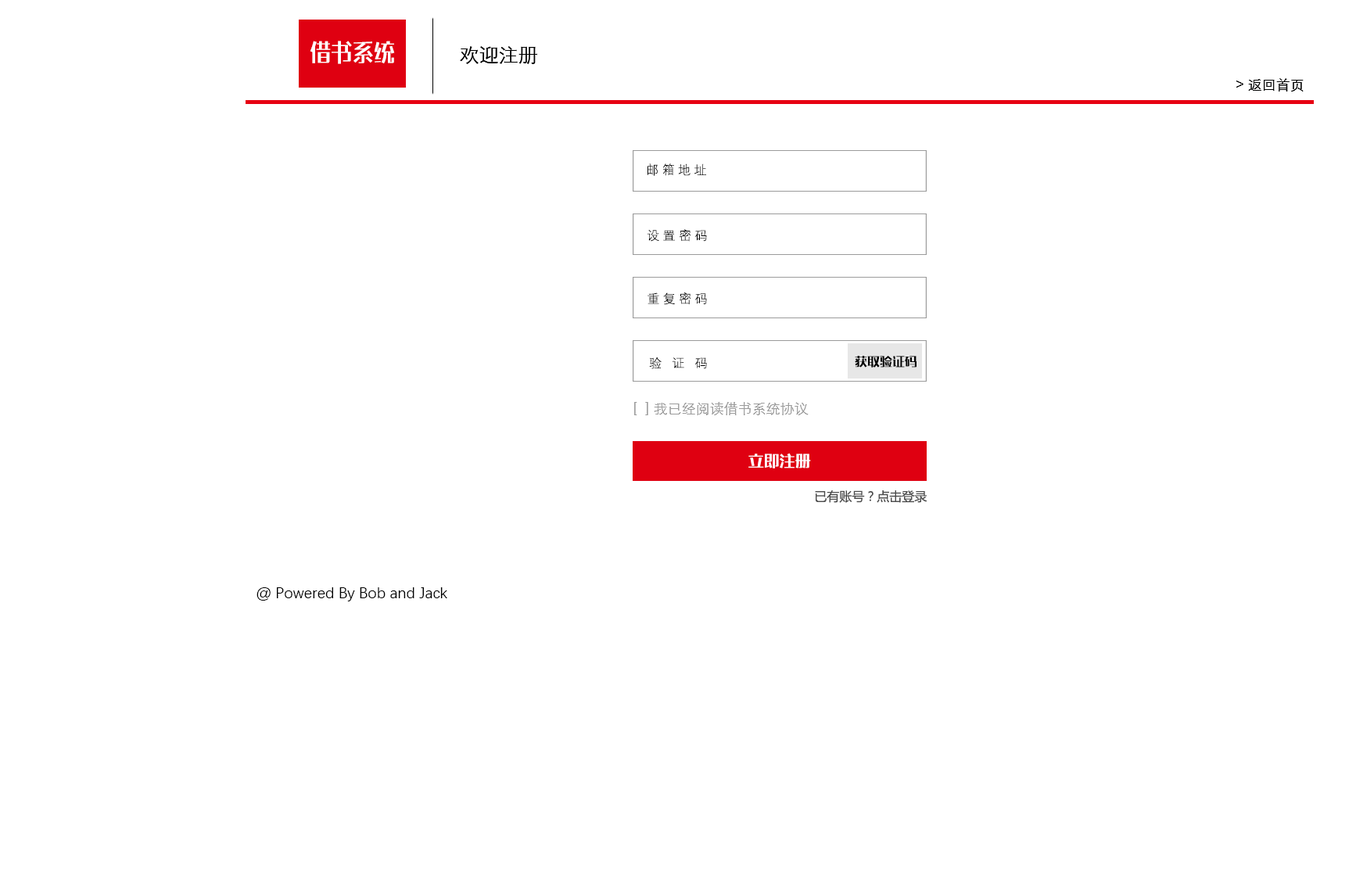
<style>
.page{position:relative;width:1356px;height:879px;background:#ffffff}
.page>*{position:absolute;margin:0}
.t1{font:24.3px "Benmo-Chenhei";color:#ffffff;scale:0.88 1}
.t2{font:19.6px "STXihei";color:#000000}
.t3{font:14.1px "STXihei";color:#000000}
.t4{font:12.5px "DengXian-Light";color:#000000}
.t5{font:12.5px "Benmo-Chenhei";color:#000000}
.t6{font:14.1px "STXihei";color:#9b9b9b}
.t7{font:15.6px "Benmo-Chenhei";color:#ffffff}
.t8{font:12.5px "MicrosoftYaHei";color:#4c4c4c}
.t9{font:15.6px "DengXian-Regular";color:#000000}
</style>
<div class="page">
<p class="t1" style="left:310px;top:41px;width:85px;height:23px">借书系统</p>
<p class="t2" style="left:460px;top:46px;width:77px;height:18px">欢迎注册</p>
<p class="t3" style="left:1237px;top:78px;width:67px;height:14px">&gt;返回首页</p>
<p class="t4" style="left:648px;top:163px;width:58px;height:13px">邮 箱 地 址</p>
<p class="t4" style="left:647px;top:229px;width:60px;height:13px">设 置 密 码</p>
<p class="t4" style="left:648px;top:293px;width:59px;height:12px">重 复 密 码</p>
<p class="t4" style="left:649px;top:357px;width:58px;height:12px">验   证   码</p>
<p class="t5" style="left:855px;top:356px;width:62px;height:12px">获取验证码</p>
<p class="t6" style="left:634px;top:402px;width:175px;height:13px">[  ] 我已经阅读借书系统协议</p>
<p class="t7" style="left:749px;top:453px;width:62px;height:16px">立即注册</p>
<p class="t8" style="left:815px;top:490px;width:113px;height:13px">已有账号？点击登录</p>
<p class="t9" style="left:257px;top:587px;width:190px;height:14px">@ Powered By Bob and Jack</p>
</div>
